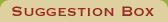
<style>
.page{position:relative;width:168px;height:22px;background:#dfd0a0}
.page>*{position:absolute;margin:0}
.t1{font:18px "Copperplate";color:#9a2b22}
</style>
<div class="page">
<p class="t1" style="left:11px;top:2px;width:144px;height:21px">Suggestion Box</p>
</div>
